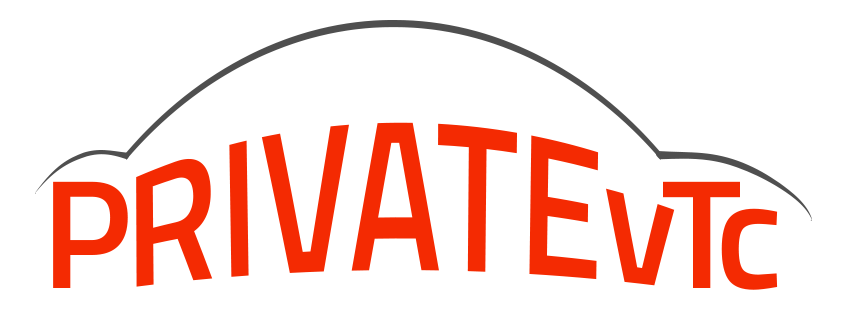
<style>
.page{position:relative;width:848px;height:324px;background:#ffffff}
.page>*{position:absolute;margin:0}
.t1{font:154.6px "TitilliumWeb-SemiBold";color:#f42a02}
.t2{font:154.6px "TitilliumWeb-SemiBold";letter-spacing:-0.1em;color:#f42a02}
</style>
<div class="page">
<p class="t1" style="left:136px;top:122px;width:539px;height:165px">RIVATEv</p>
<p class="t1" style="left:53px;top:181px;width:75px;height:107px">P</p>
<p class="t2" style="left:663px;top:181px;width:115px;height:109px">Tc</p>
</div>
